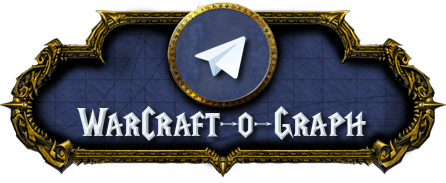
<style>
.page{position:relative;width:446px;height:183px;background:#ffffff}
.page>*{position:absolute;margin:0}
.t1{font:40.2px "LifeCraft";color:#eff7fc;scale:1.03 1}
</style>
<div class="page">
<p class="t1" style="left:76px;top:106px;width:290px;height:35px">WarCraft-o-Graph</p>
</div>
